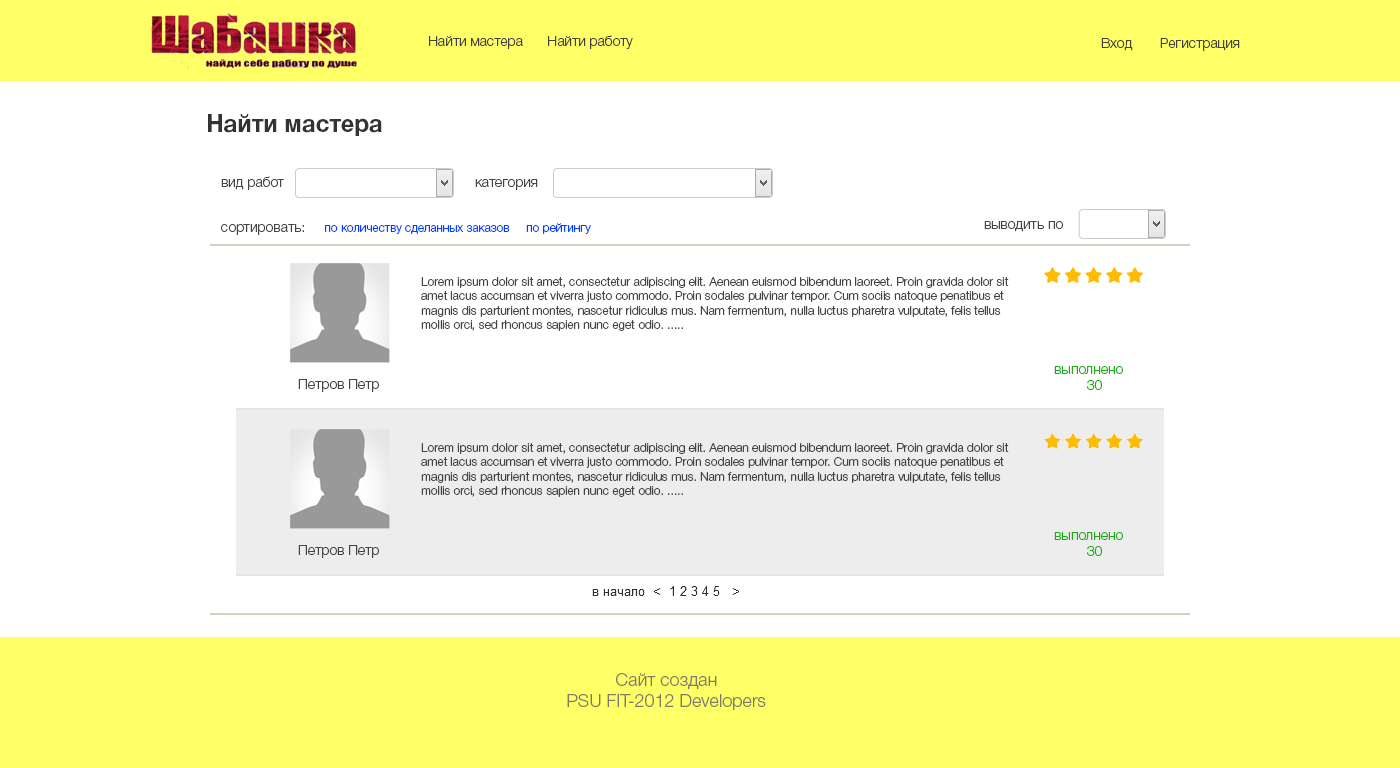
<style>
.page{position:relative;width:1400px;height:768px;background:#ffffff}
.page>*{position:absolute;margin:0}
.t1{font:14px "HelveticaNeueCyr-Light";color:#444241}
.t2{font:24px "HelveticaNeueCyr-Bold";color:#333333}
.t3{font:14px "HelveticaNeueCyr-Light";color:#444444}
.t4{font:12px "HelveticaNeueCyr-Light";color:#0042fe}
.t5{font:12px "HelveticaNeueCyr-Light";color:#444444}
.t6{font:14px "HelveticaNeueCyr-Light";color:#1aab17}
.t7{font:18px "HelveticaNeueCyr-Light";color:#7c7a6a}
</style>
<div class="page">
<p class="t1" style="left:429px;top:36px;width:94px;height:13px">Найти мастера</p>
<p class="t1" style="left:548px;top:35px;width:85px;height:14px">Найти работу</p>
<p class="t1" style="left:1101px;top:38px;width:139px;height:13px">Вход       Регистрация</p>
<p class="t2" style="left:208px;top:114px;width:174px;height:22px">Найти мастера</p>
<p class="t3" style="left:221px;top:176px;width:63px;height:14px">вид работ</p>
<p class="t3" style="left:475px;top:179px;width:63px;height:11px">категория</p>
<p class="t3" style="left:984px;top:221px;width:79px;height:11px">выводить по</p>
<p class="t4" style="left:221px;top:223px;width:370px;height:12px"><span class="t3">сортировать:     </span>по количеству сделанных заказов     по рейтингу</p>
<p class="t5" style="left:421px;top:277px;width:588px;height:54px">Lorem ipsum dolor sit amet, consectetur adipiscing elit. Aenean euismod bibendum laoreet. Proin gravida dolor sit amet lacus accumsan et viverra justo commodo. Proin sodales pulvinar tempor. Cum sociis natoque penatibus et magnis dis parturient montes, nascetur ridiculus mus. Nam fermentum, nulla luctus pharetra vulputate, felis tellus mollis orci, sed rhoncus sapien nunc eget odio. .....</p>
<p class="t6" style="left:1054px;top:366px;width:69px;height:24px;text-align:center">выполнено <br>  30</p>
<p class="t3" style="left:298px;top:379px;width:81px;height:13px">Петров Петр</p>
<p class="t5" style="left:421px;top:443px;width:588px;height:54px">Lorem ipsum dolor sit amet, consectetur adipiscing elit. Aenean euismod bibendum laoreet. Proin gravida dolor sit amet lacus accumsan et viverra justo commodo. Proin sodales pulvinar tempor. Cum sociis natoque penatibus et magnis dis parturient montes, nascetur ridiculus mus. Nam fermentum, nulla luctus pharetra vulputate, felis tellus mollis orci, sed rhoncus sapien nunc eget odio. .....</p>
<p class="t6" style="left:1054px;top:532px;width:69px;height:24px;text-align:center">выполнено <br>  30</p>
<p class="t3" style="left:298px;top:545px;width:81px;height:13px">Петров Петр</p>
<p class="t7" style="left:567px;top:673px;width:199px;height:37px;text-align:center">Сайт создан<br>PSU FIT-2012 Developers</p>
</div>
